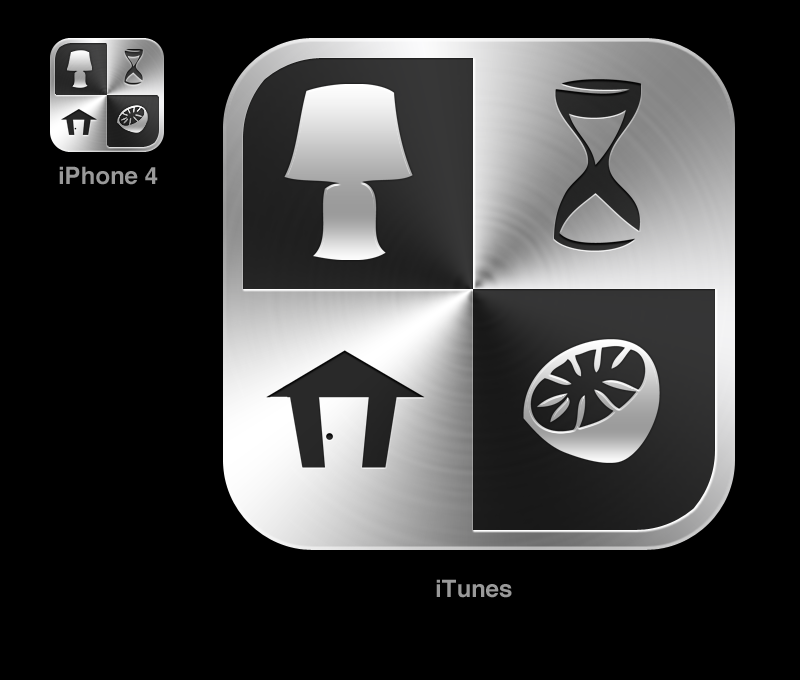
<style>
.page{position:relative;width:800px;height:680px;background:#000000}
.page>*{position:absolute;margin:0}
.t1{font:24px "Helvetica-Bold";color:#999999}
</style>
<div class="page">
<p class="t1" style="left:59px;top:166px;width:99px;height:19px">iPhone 4</p>
<p class="t1" style="left:436px;top:579px;width:76px;height:19px">iTunes</p>
</div>
